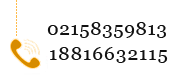
<style>
.page{position:relative;width:172px;height:75px;background:#ffffff}
.page>*{position:absolute;margin:0}
.t1{font:18.6px "Georgia";letter-spacing:0.05em;color:#111111}
.t2{font:18.6px "Georgia";letter-spacing:0.07em;color:#111111}
</style>
<div class="page">
<p class="t1" style="left:47px;top:22px;width:119px;height:16px">02158359813</p>
<p class="t2" style="left:50px;top:47px;width:118px;height:16px">18816632115</p>
</div>
